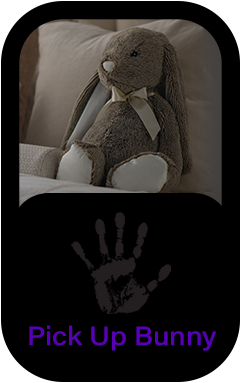
<style>
.page{position:relative;width:241px;height:383px;background:#000000}
.page>*{position:absolute;margin:0}
.t1{font:26.3px "AcuminConcept-Medium";color:#5800b3;scale:1.11 1}
</style>
<div class="page">
<p class="t1" style="left:29px;top:325px;width:187px;height:26px">Pick Up Bunny</p>
</div>
